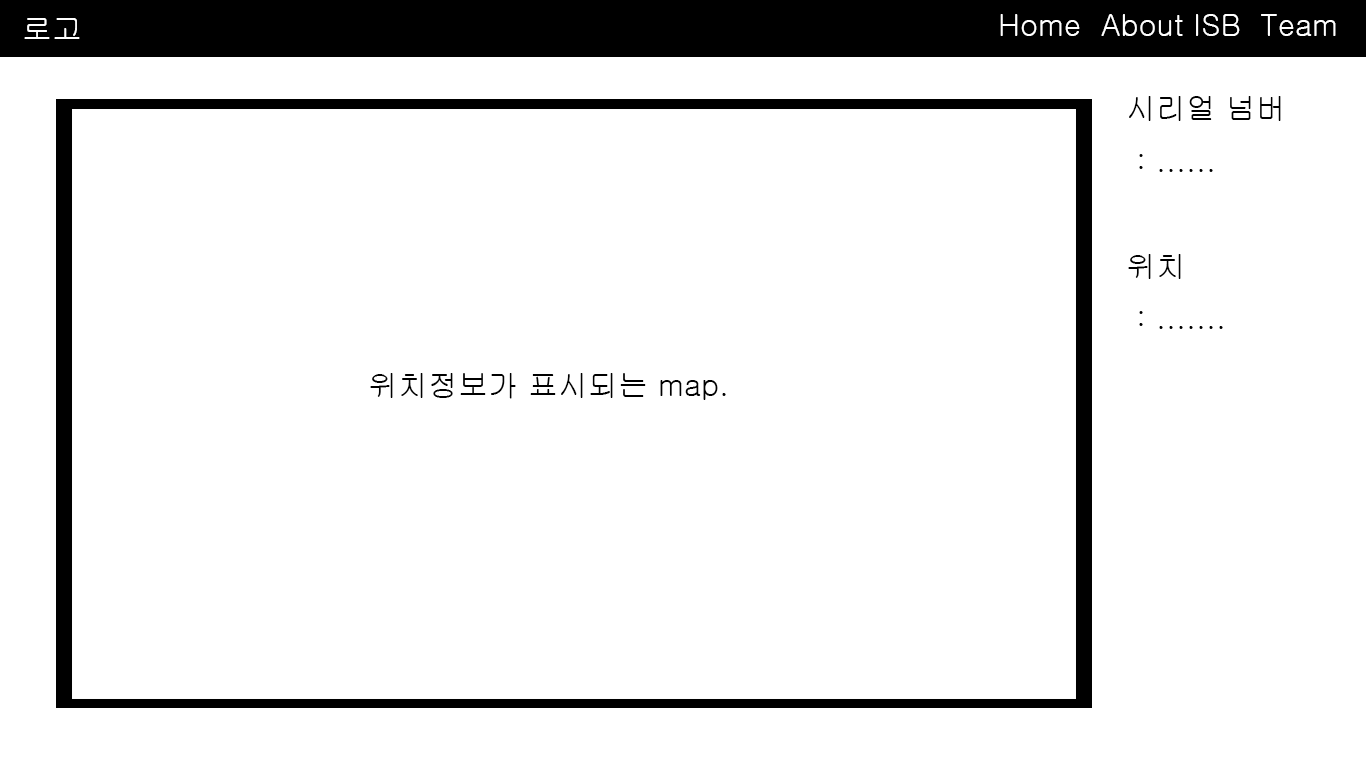
<style>
.page{position:relative;width:1366px;height:768px;background:#ffffff}
.page>*{position:absolute;margin:0}
.t1{font:30px "Gulim";color:#ffffff}
.t2{font:30px "Gulim";color:#000000}
</style>
<div class="page">
<p class="t1" style="left:1000px;top:14px;width:336px;height:22px">Home  About ISB  Team</p>
<p class="t1" style="left:24px;top:18px;width:56px;height:21px">로고</p>
<p class="t2" style="left:1128px;top:96px;width:153px;height:233px">시리얼 넘버<br> : ......<br><br>위치<br> : .......</p>
<p class="t2" style="left:370px;top:373px;width:356px;height:27px">위치정보가 표시되는 map.</p>
</div>
